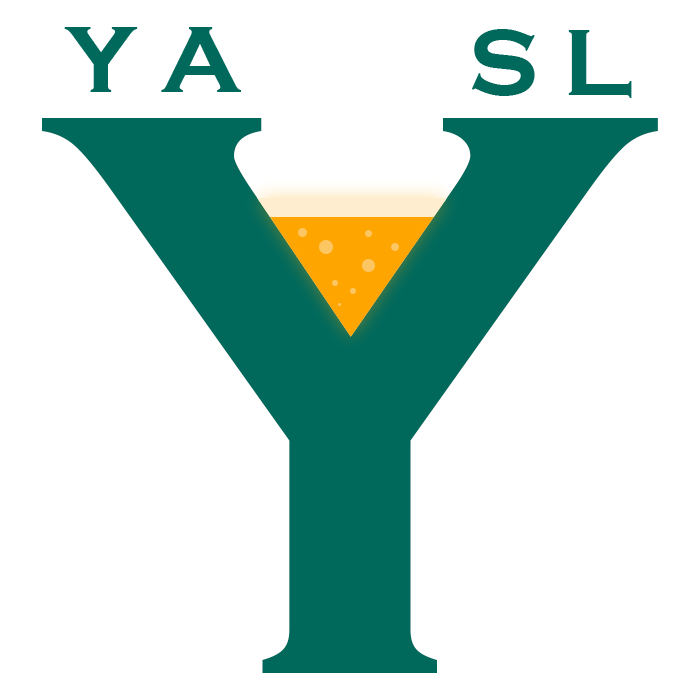
<style>
.page{position:relative;width:700px;height:700px;background:#ffffff}
.page>*{position:absolute;margin:0}
.t1{font:98.4px "CopperplateGothic-Bold";color:#00695c}
.t2{font:833.3px "CopperplateGothic-Bold";color:#00695c}
</style>
<div class="page">
<p class="t1" style="left:64px;top:27px;width:177px;height:65px">Y A</p>
<p class="t1" style="left:472px;top:29px;width:160px;height:69px">S L</p>
<p class="t2" style="left:42px;top:118px;width:616px;height:555px">Y</p>
</div>
